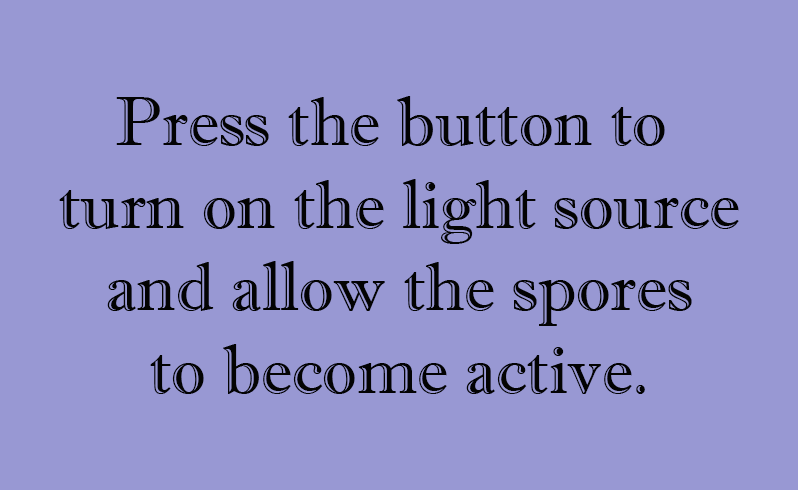
<style>
.page{position:relative;width:798px;height:490px;background:#9898d3}
.page>*{position:absolute;margin:0}
.t1{font:68.7px "ImprintMT-Shadow";color:#030303}
</style>
<div class="page">
<p class="t1" style="left:59px;top:96px;width:680px;height:298px;text-align:center">Press the button to <br>turn on the light source<br>and allow the spores<br>to become active.</p>
</div>
